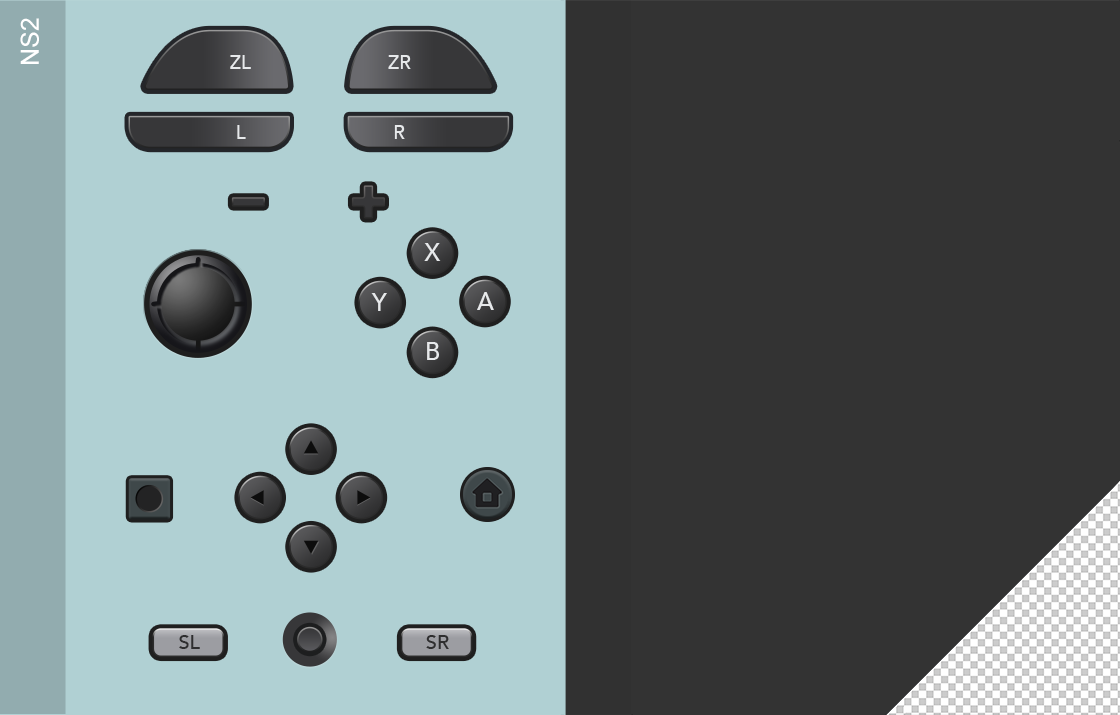
<style>
.page{position:relative;width:1120px;height:715px;background:#333333}
.page>*{position:absolute;margin:0}
.t1{font:25px "ArialMT";color:#ffffff}
.t2{font:19.1px "Avenir-Medium";color:#e7e9eb}
.t3{font:24.2px "Avenir-Medium";color:#e7e9eb}
.t4{font:19.8px "Avenir-Medium";color:#2e2e2f}
</style>
<div class="page">
<p class="t1" style="left:20px;top:18px;width:19px;height:46px;rotate:-90deg">NS2</p>
<p class="t2" style="left:230px;top:55px;width:21px;height:14px">ZL</p>
<p class="t2" style="left:388px;top:55px;width:23px;height:14px">ZR</p>
<p class="t2" style="left:237px;top:125px;width:9px;height:14px">L</p>
<p class="t2" style="left:394px;top:125px;width:11px;height:14px">R</p>
<p class="t3" style="left:424px;top:243px;width:17px;height:18px">X</p>
<p class="t3" style="left:371px;top:293px;width:16px;height:18px">Y</p>
<p class="t3" style="left:477px;top:292px;width:17px;height:18px">A</p>
<p class="t3" style="left:427px;top:342px;width:12px;height:18px">B</p>
<p class="t4" style="left:179px;top:635px;width:21px;height:14px">SL</p>
<p class="t4" style="left:426px;top:635px;width:23px;height:14px">SR</p>
</div>
